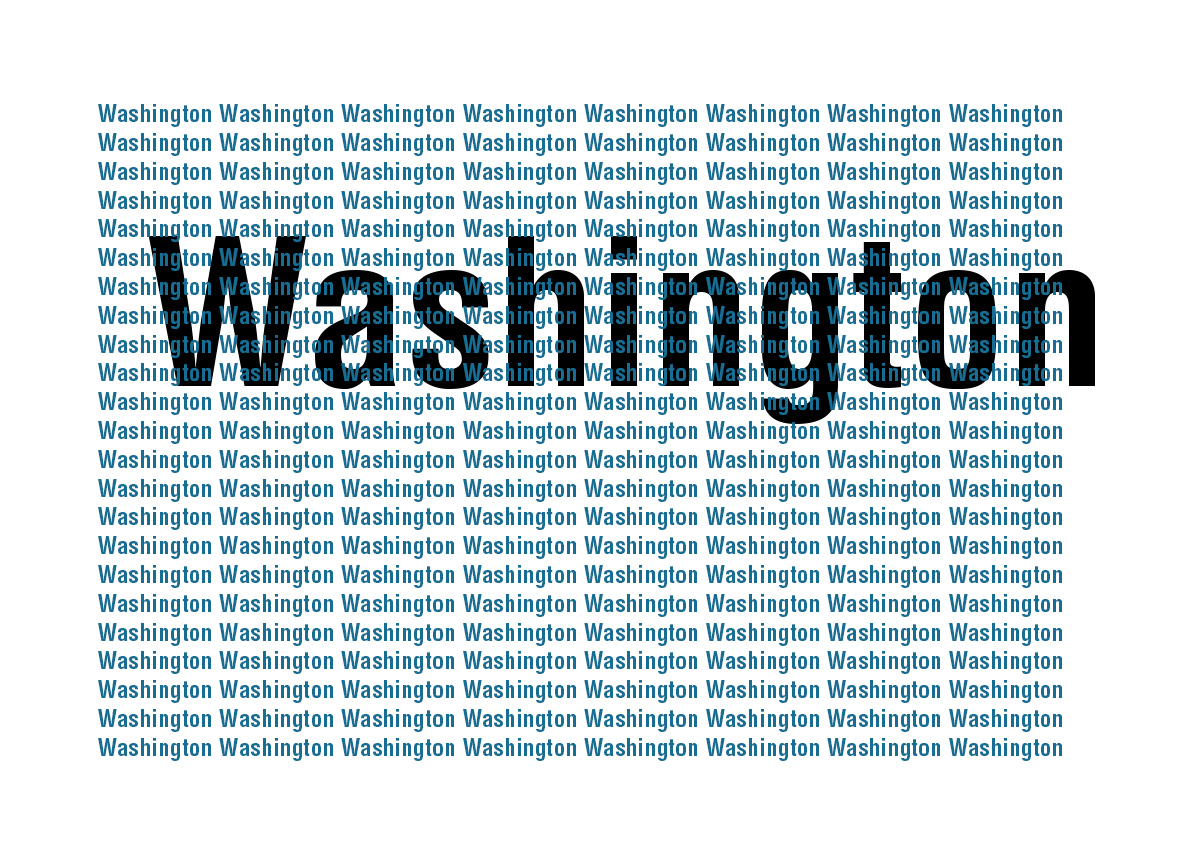
<style>
.page{position:relative;width:1200px;height:847px;background:#ffffff}
.page>*{position:absolute;margin:0}
.t1{font:24px "HelveticaLTStd-BoldCond";color:#176e92}
</style>
<div class="page">
<p class="t1" style="left:98px;top:104px;width:964px;height:657px">Washington Washington Washington Washington Washington Washington Washington Washington <br>Washington Washington Washington Washington Washington Washington Washington Washington <br>Washington Washington Washington Washington Washington Washington Washington Washington <br>Washington Washington Washington Washington Washington Washington Washington Washington <br>Washington Washington Washington Washington Washington Washington Washington Washington <br>Washington Washington Washington Washington Washington Washington Washington Washington <br>Washington Washington Washington Washington Washington Washington Washington Washington <br>Washington Washington Washington Washington Washington Washington Washington Washington <br>Washington Washington Washington Washington Washington Washington Washington Washington <br>Washington Washington Washington Washington Washington Washington Washington Washington <br>Washington Washington Washington Washington Washington Washington Washington Washington <br>Washington Washington Washington Washington Washington Washington Washington Washington <br>Washington Washington Washington Washington Washington Washington Washington Washington <br>Washington Washington Washington Washington Washington Washington Washington Washington <br>Washington Washington Washington Washington Washington Washington Washington Washington <br>Washington Washington Washington Washington Washington Washington Washington Washington <br>Washington Washington Washington Washington Washington Washington Washington Washington <br>Washington Washington Washington Washington Washington Washington Washington Washington <br>Washington Washington Washington Washington Washington Washington Washington Washington <br>Washington Washington Washington Washington Washington Washington Washington Washington <br>Washington Washington Washington Washington Washington Washington Washington Washington <br>Washington Washington Washington Washington Washington Washington Washington Washington <br>Washington Washington Washington Washington Washington Washington Washington Washington</p>
</div>
